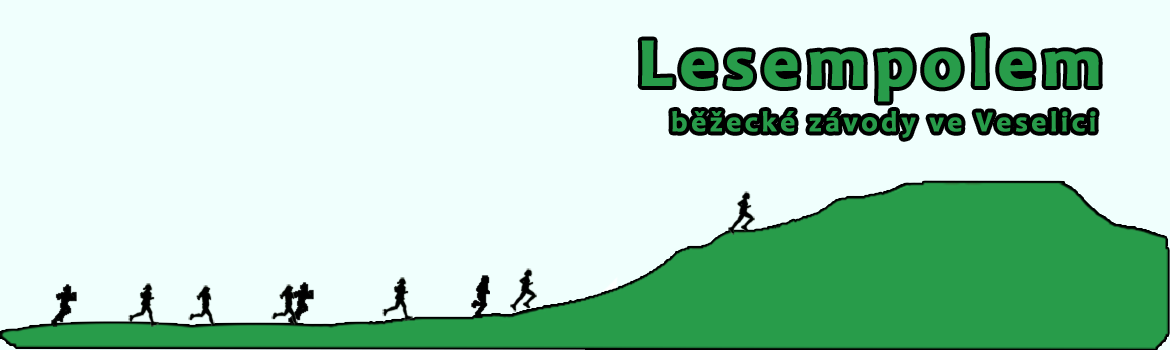
<style>
.page{position:relative;width:1170px;height:350px;background:#f0fffd}
.page>*{position:absolute;margin:0}
.t1{font:29px/46px "Candara-Bold";letter-spacing:0.104em;color:#289c4a;font-weight:bold}
.t2{font:70px/11.7px "Candara-Bold";letter-spacing:0.1em;color:#289c4a;font-weight:bold}
</style>
<div class="page">
<p class="t1" style="left:641px;top:36px;width:458px;height:102px"><span class="t2">Lesempolem<br>   </span>běžecké závody ve Veselici</p>
</div>
